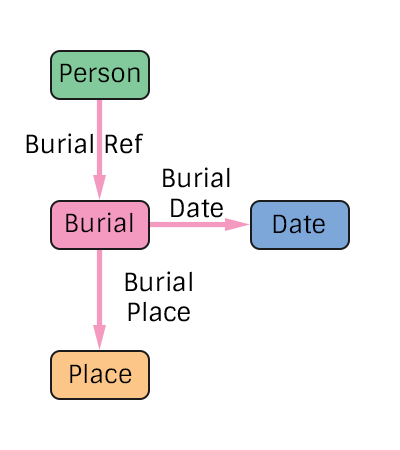
<style>
.page{position:relative;width:400px;height:450px;background:#ffffff}
.page>*{position:absolute;margin:0}
.t1{font:25px "Sintony";color:#000000}
</style>
<div class="page">
<p class="t1" style="left:60px;top:63px;width:80px;height:20px">Person</p>
<p class="t1" style="left:26px;top:133px;width:118px;height:21px">Burial Ref</p>
<p class="t1" style="left:163px;top:167px;width:67px;height:51px;text-align:center">Burial<br>Date</p>
<p class="t1" style="left:66px;top:212px;width:67px;height:21px">Burial</p>
<p class="t1" style="left:273px;top:214px;width:52px;height:20px">Date</p>
<p class="t1" style="left:125px;top:271px;width:67px;height:51px;text-align:center">Burial<br>Place</p>
<p class="t1" style="left:70px;top:363px;width:62px;height:21px">Place</p>
</div>
